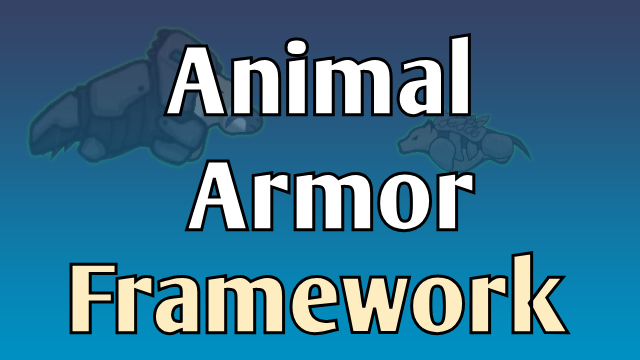
<style>
.page{position:relative;width:640px;height:360px}
.page>*{position:absolute;margin:0}
.t1{font:96px "ArmWrestler-Bold";color:#ffffff}
.t2{font:96px "ArmWrestler-Bold";color:#ffedc2}
</style>
<div class="page">
<p class="t1" style="left:162px;top:31px;width:315px;height:203px;text-align:center">Animal <br>Armor</p>
<p class="t2" style="left:68px;top:249px;width:504px;height:88px">Framework</p>
</div>
